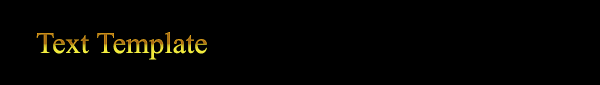
<style>
.page{position:relative;width:600px;height:85px;background:#000000}
.page>*{position:absolute;margin:0}
.t1{font:30px "TimesNewRomanPSMT"}
</style>
<div class="page">
<p class="t1" style="left:36px;top:32px;width:171px;height:28px">Text Template</p>
</div>
